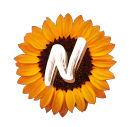
<style>
.page{position:relative;width:133px;height:127px;background:#ffffff}
.page>*{position:absolute;margin:0}
.t1{font:84.7px "Heaters";letter-spacing:0.05em;color:#ffffff;scale:1.24 1}
.t2{font:84.7px "Heaters";letter-spacing:0.05em;scale:1.24 1}
</style>
<div class="page">
<p class="t1" style="left:44px;top:37px;width:43px;height:50px">n</p>
<p class="t2" style="left:46px;top:40px;width:43px;height:50px">n</p>
</div>
